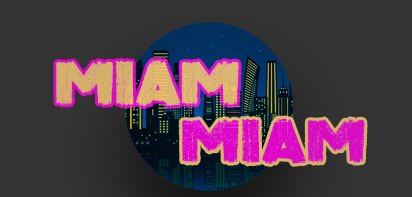
<style>
.page{position:relative;width:412px;height:197px;background:#333333}
.page>*{position:absolute;margin:0}
.t1{font:73.4px "SinisterBlack-Regular";letter-spacing:-0.02em;color:#dbb36a}
.t2{font:73.4px "SinisterBlack-Regular";letter-spacing:-0.02em;color:#dd0ac7}
</style>
<div class="page">
<p class="t1" style="left:56px;top:60px;width:183px;height:46px">miam</p>
<p class="t2" style="left:181px;top:118px;width:184px;height:46px">miam</p>
</div>
